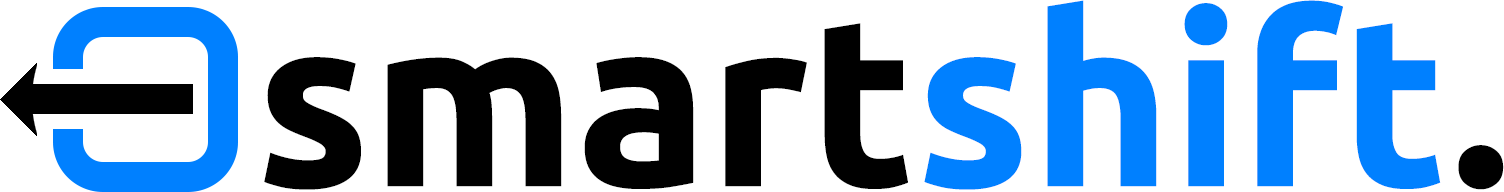
<style>
.page{position:relative;width:1504px;height:192px;background:#ffffff}
.page>*{position:absolute;margin:0}
.t1{font:238.9px "Ubuntu-Bold";color:#000000}
.t2{font:238.9px "Ubuntu-Bold";color:#0080ff}
</style>
<div class="page">
<p class="t1" style="left:264px;top:0px;width:1240px;height:190px">smart<span class="t2">shift</span>.</p>
</div>
